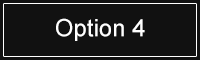
<style>
.page{position:relative;width:200px;height:60px;background:#111111}
.page>*{position:absolute;margin:0}
.t1{font:24px "ArialMT";color:#ffffff}
</style>
<div class="page">
<p class="t1" style="left:56px;top:18px;width:89px;height:23px">Option 4</p>
</div>
